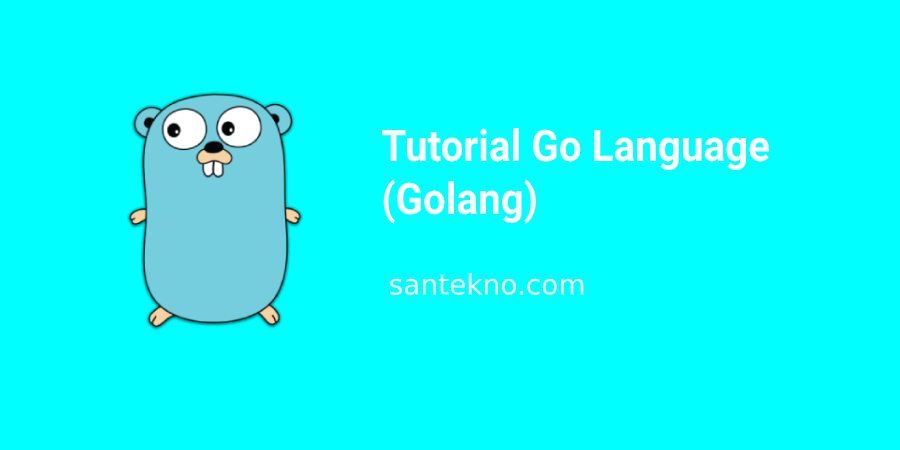
<style>
.page{position:relative;width:900px;height:450px;background:#00ffff}
.page>*{position:absolute;margin:0}
.t1{font:43.6px "Roboto-Bold";color:#ffffff;scale:0.93 1}
.t2{font:28px "Impact";color:#ffffff}
</style>
<div class="page">
<p class="t1" style="left:382px;top:128px;width:387px;height:96px">Tutorial Go Language<br>(Golang)</p>
<p class="t2" style="left:390px;top:273px;width:194px;height:22px">santekno.com</p>
</div>
